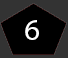
<style>
.page{position:relative;width:68px;height:58px;background:#000000}
.page>*{position:absolute;margin:0}
.t1{font:30px "MyriadPro-Regular";color:#ffffff}
</style>
<div class="page">
<p class="t1" style="left:25px;top:20px;width:14px;height:20px">6</p>
</div>
